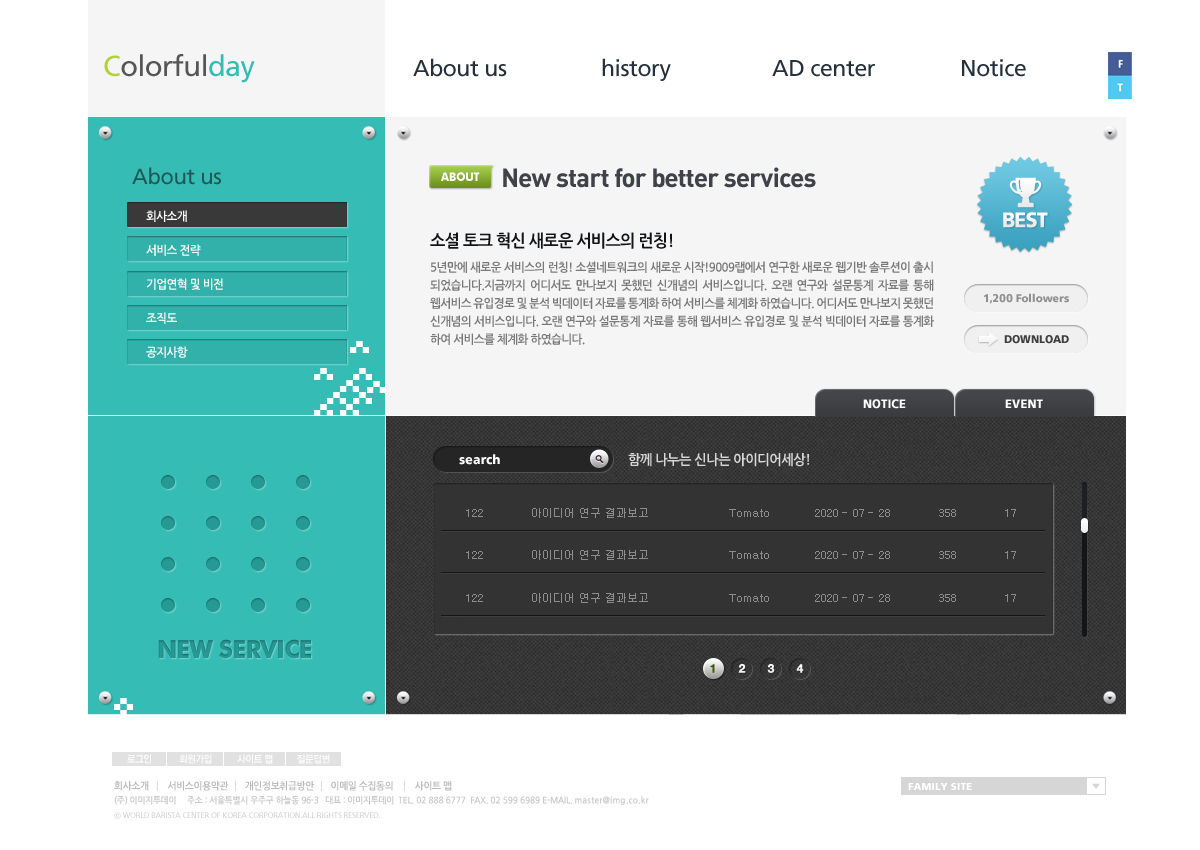
<style>
.page{position:relative;width:1200px;height:850px;background:#ffffff}
.page>*{position:absolute;margin:0}
.t1{font:29px "FrutigerLTStd-Roman";letter-spacing:-0.02em;color:#565656}
.t2{font:29px "FrutigerLTStd-Roman";letter-spacing:-0.02em;color:#afd33f}
.t3{font:29px "FrutigerLTStd-Roman";letter-spacing:-0.02em;color:#35bcb5}
.t4{font:23px "FrutigerLTStd-Roman";letter-spacing:-0.02em;color:#25303b}
.t5{font:22px "FrutigerLTStd-Roman";letter-spacing:-0.02em;color:#1e5855}
.t6{font:17px "FuturaBT-Bold";letter-spacing:0.01em;color:#ffffff;font-variant:small-caps;scale:0.91 1}
.t7{font:26px "DIN-BoldAlternate";letter-spacing:-0.03em;color:#404249}
.t8{font:12px/17px "NanumGothicBold";letter-spacing:-0.04em;color:#ffffff;scale:0.95 1}
.t9{font:17px "NanumGothicBold";letter-spacing:-0.04em;color:#121316;scale:0.95 1}
.t10{font:12px/18px "NanumGothicBold";letter-spacing:-0.04em;color:#787878;scale:0.95 1}
.t11{font:11px "Frutiger-Black";letter-spacing:-0.02em;color:#8f8f8f;scale:0.97 1}
.t12{font:12px "Frutiger-Black";letter-spacing:0.01em;color:#ffffff;scale:0.95 1}
.t13{font:13px "Frutiger-Black";letter-spacing:0.01em;color:#ffffff;scale:0.95 1}
.t14{font:14px "NanumGothicBold";letter-spacing:-0.04em;color:#d7d7d7;scale:0.95 1}
.t15{font:10px "NanumGothicBold";letter-spacing:-0.03em;color:#bababa;scale:0.95 1}
.t16{font:9px "NanumGothicBold";letter-spacing:-0.03em;color:#bababa;scale:0.95 1}
.t17{font:9px "NanumGothicBold";letter-spacing:-0.02em;color:#bababa;scale:0.95 1}
.t18{font:9px "NanumGothicBold";letter-spacing:0.02em;color:#bababa;scale:0.95 1}
.t19{font:8px "Frutiger-Roman";letter-spacing:-0.015em;scale:0.94 1}
.t20{font:8px "YGO540";letter-spacing:-0.015em;scale:0.94 1}
</style>
<div class="page">
<p class="t1" style="left:104px;top:54px;width:151px;height:29px"><span class="t2">C</span>olorful<span class="t3">day</span></p>
<p class="t4" style="left:413px;top:58px;width:94px;height:19px">About us</p>
<p class="t4" style="left:602px;top:58px;width:69px;height:23px">history</p>
<p class="t4" style="left:772px;top:60px;width:103px;height:17px">AD center</p>
<p class="t4" style="left:962px;top:59px;width:64px;height:18px">Notice</p>
<p class="t5" style="left:132px;top:167px;width:89px;height:18px">About us</p>
<p class="t6" style="left:441px;top:172px;width:39px;height:9px">about</p>
<p class="t7" style="left:503px;top:167px;width:313px;height:21px">New start for better services</p>
<p class="t8" style="left:146px;top:210px;width:77px;height:148px">회사소개<br><br>서비스 전략<br><br>기업연혁 및 비전<br><br>조직도<br><br>공지사항</p>
<p class="t9" style="left:430px;top:232px;width:243px;height:17px">소셜 토크 혁신 새로운 서비스의 런칭!</p>
<p class="t10" style="left:430px;top:261px;width:504px;height:84px;text-align:justify">5년만에 새로운 서비스의 런칭! 소셜네트워크의 새로운 시작!9009랩에서 연구한 새로운 웹기반 솔루션이 출시 되었습니다.지금까지 어디서도 만나보지 못했던 신개념의 서비스입니다. 오랜 연구와 설문통계 자료를 통해 웹서비스 유입경로 및 분석 빅데이터 자료를 통계화 하여 서비스를 체계화 하였습니다. 어디서도 만나보지 못했던 신개념의 서비스입니다. 오랜 연구와 설문통계 자료를 통해 웹서비스 유입경로 및 분석 빅데이터 자료를 통계화 하여 서비스를 체계화 하였습니다.</p>
<p class="t11" style="left:983px;top:293px;width:86px;height:11px">1,200 Followers</p>
<p class="t12" style="left:863px;top:399px;width:43px;height:10px">NOTICE</p>
<p class="t13" style="left:459px;top:454px;width:41px;height:11px">search</p>
<p class="t14" style="left:628px;top:453px;width:181px;height:14px">함께 나누는 신나는 아이디어세상!</p>
<p class="t15" style="left:114px;top:781px;width:338px;height:10px">회사소개        서비스이용약관       개인정보취급방안       이메일 수집동의         사이트 맵</p>
<p class="t16" style="left:114px;top:795px;width:535px;height:10px;opacity:0.8">(주) 이미지투데이     주소 : 서울특별시 우주구 하늘동 96-3   대표 : 이미지투데이  <span class="t17">TEL. 02 888 6777  FAX. 02 599 6989 E-MAIL. </span><span class="t18">master@img.co.kr</span></p>
<p class="t19" style="left:114px;top:812px;width:266px;height:7px"><span class="t20">ⓒ</span> WORLD BARISTA CENTER OF KOREA CORPORATION.ALL RIGHTS RESERVED.</p>
</div>
